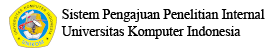
<style>
.page{position:relative;width:270px;height:50px;background:#ffffff}
.page>*{position:absolute;margin:0}
.t1{font:13.7px "TimesNewRomanPSMT";color:#000000}
</style>
<div class="page">
<p class="t1" style="left:61px;top:9px;width:204px;height:30px">Sistem Pengajuan Penelitian Internal<br>Universitas Komputer Indonesia</p>
</div>
